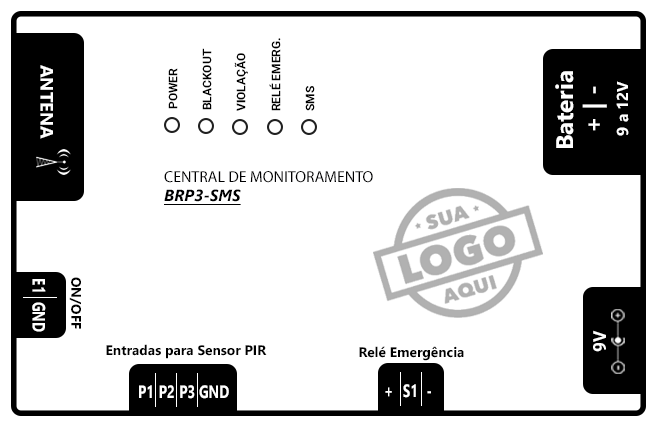
<style>
.page{position:relative;width:655px;height:421px;background:#ffffff}
.page>*{position:absolute;margin:0}
.t1{font:12px "Roboto-Bold";color:#000000}
.t2{font:18px "SegoeUI-Bold";color:#ffffff}
.t3{font:24px "SegoeUI-Bold";color:#ffffff}
.t4{font:15.7px "SegoeUI-Bold";color:#ffffff}
.t5{font:16px "MyriadPro-Regular";color:#000001}
.t6{font:16px "SegoeUI-BoldItalic";color:#000001;text-decoration:underline}
.t7{font:18px "SegoeUI-Bold";color:#ffffff;scale:0.74 1}
.t8{font:22.5px "SegoeUI-Bold";color:#ffffff;scale:0.74 1}
.t9{font:13.7px "SegoeUI-Bold";color:#000000}
.t10{font:18px "Roboto-Bold";color:#ffffff;scale:0.96 1}
.t11{font:18px "SegoeUI-Bold";color:#ffffff;scale:0.75 1}
.t12{font:22.5px "SegoeUI-Bold";color:#ffffff;scale:0.75 1}
</style>
<div class="page">
<p class="t1" style="left:269px;top:38px;width:12px;height:73px;rotate:-90deg">RELÉ EMERG.</p>
<p class="t1" style="left:202px;top:48px;width:10px;height:62px;rotate:-90deg">BLACKOUT</p>
<p class="t1" style="left:234px;top:53px;width:14px;height:58px;rotate:-90deg">VIOLAÇÃO</p>
<p class="t2" style="left:40px;top:65px;width:13px;height:74px;rotate:90deg">ANTENA</p>
<p class="t1" style="left:168px;top:68px;width:10px;height:41px;rotate:-90deg">POWER</p>
<p class="t3" style="left:555px;top:71px;width:19px;height:77px;rotate:-90deg">Bateria</p>
<p class="t1" style="left:305px;top:86px;width:10px;height:25px;rotate:-90deg">SMS</p>
<p class="t3" style="left:582px;top:86px;width:25px;height:45px;rotate:-90deg">+ | -</p>
<p class="t4" style="left:616px;top:81px;width:13px;height:55px;rotate:-90deg">9 a 12V</p>
<p class="t5" style="left:164px;top:171px;width:209px;height:34px">CENTRAL DE MONITORAMENTO<br><span class="t6">BRP3-SMS</span></p>
<p class="t7" style="left:32px;top:279px;width:14px;height:53px;rotate:90deg"><span class="t8">  </span>E1  GND</p>
<p class="t9" style="left:69px;top:277px;width:12px;height:52px;rotate:90deg">ON/OFF</p>
<p class="t10" style="left:593px;top:330px;width:13px;height:22px;rotate:-90deg">9V</p>
<p class="t9" style="left:106px;top:344px;width:161px;height:15px">Entradas para Sensor PIR</p>
<p class="t9" style="left:359px;top:346px;width:105px;height:15px">Relé Emergência</p>
<p class="t11" style="left:139px;top:385px;width:90px;height:14px"><span class="t12">  </span>P1 P2 P3 GND</p>
<p class="t11" style="left:385px;top:384px;width:46px;height:14px"><span class="t12">  </span>+  S1  -</p>
</div>
